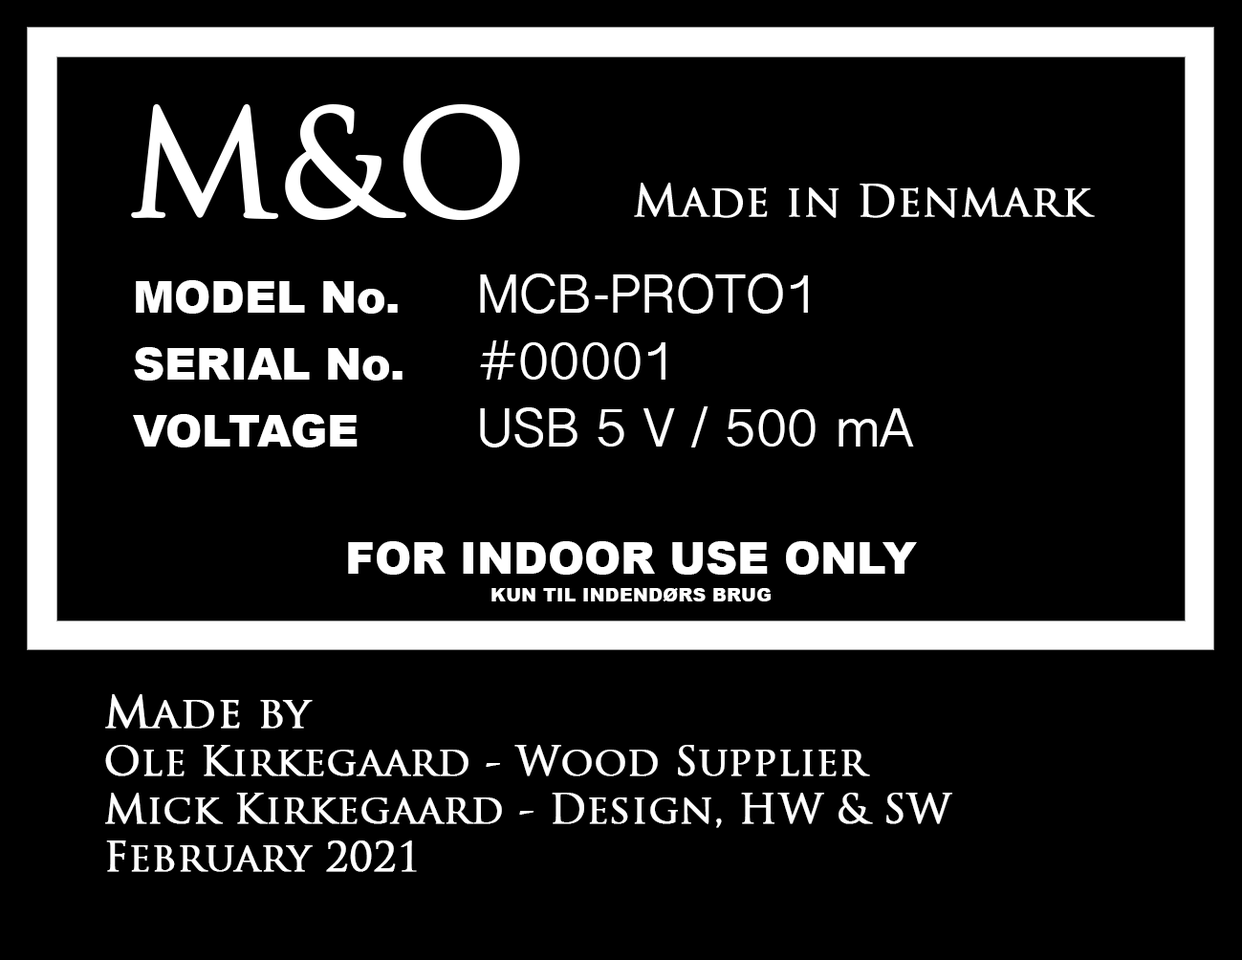
<style>
.page{position:relative;width:1242px;height:960px;background:#000000}
.page>*{position:absolute;margin:0}
.t1{font:43.8px "TrajanPro-Regular";color:#ffffff;font-weight:bold}
.t2{font:143.4px "TrajanPro-Regular";color:#ffffff;font-weight:bold}
.t3{font:55.8px "GujaratiSangamMN";color:#ffffff}
.t4{font:43.8px "Arial-Black";color:#ffffff}
.t5{font:31.9px "Arial-Black";color:#ffffff}
.t6{font:39.8px "TrajanPro-Regular";color:#ffffff;font-weight:bold}
</style>
<div class="page">
<p class="t1" style="left:131px;top:103px;width:964px;height:118px"><span class="t2">M&amp;O  </span>Made in Denmark</p>
<p class="t3" style="left:133px;top:273px;width:781px;height:174px"><span class="t4"><br>MODEL No.   </span>MCB-PROTO1<br><span class="t4">SERIAL No.   </span>#00001<br><span class="t4">VOLTAGE    </span>USB 5 V / 500 mA</p>
<p class="t5" style="left:348px;top:541px;width:569px;height:60px;text-align:center"><span class="t4">FOR INDOOR USE ONLY<br></span>KUN TIL INDENDØRS BRUG</p>
<p class="t6" style="left:105px;top:694px;width:847px;height:178px"><span class="t1">Made by<br></span>Ole Kirkegaard - Wood Supplier<br>Mick Kirkegaard - Design, HW &amp; SW<br>February 2021</p>
</div>
